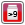
<style>
.page{position:relative;width:25px;height:25px}
.page>*{position:absolute;margin:0}
.t1{font:8px "ArialMT";color:#000000}
</style>
<div class="page">
<p class="t1" style="left:8px;top:11px;width:10px;height:6px">&gt;9</p>
</div>
